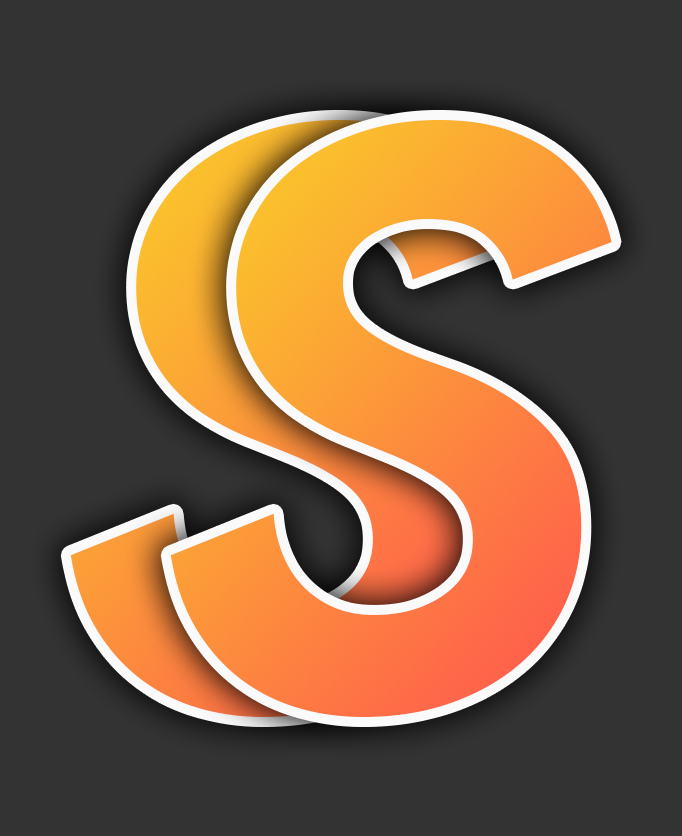
<style>
.page{position:relative;width:682px;height:836px;background:#333333}
.page>*{position:absolute;margin:0}
.t1{font:797px "ProductSans-BoldItalic";letter-spacing:-0.22em}
</style>
<div class="page">
<p class="t1" style="left:70px;top:120px;width:442px;height:597px">S</p>
<p class="t1" style="left:170px;top:120px;width:442px;height:597px">S</p>
</div>
